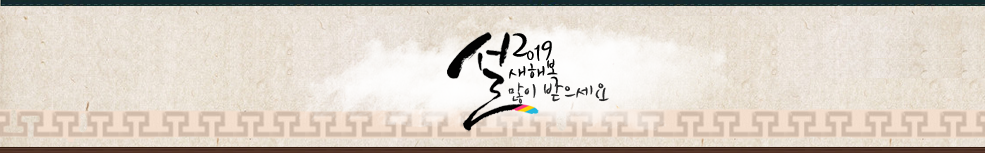
<style>
.page{position:relative;width:985px;height:153px}
.page>*{position:absolute;margin:0}
.t1{font:48px "Rix-Flowers";letter-spacing:-0.07em;color:#000000}
.t2{font:24px "Rix-Flowers";letter-spacing:-0.07em;color:#000000}
.t3{font:30px "Rix-Flowers";letter-spacing:-0.07em;color:#000000}
.t4{font:36px "Rix-Flowers";letter-spacing:-0.07em;color:#000000}
.t5{font:24px/12px "Rix-Flowers";color:#262626}
.t6{font:24px/12px "Rix-Flowers";color:#000000}
.t7{font:18px/12px "Rix-Flowers";color:#262626}
</style>
<div class="page">
<p class="t1" style="left:512px;top:33px;width:40px;height:28px">2<span class="t2">0</span><span class="t3">1</span><span class="t4">9</span></p>
<p class="t5" style="left:508px;top:59px;width:101px;height:45px"><span class="t6">새해복 <br></span><span class="t7">많</span>이 받으세요</p>
</div>
